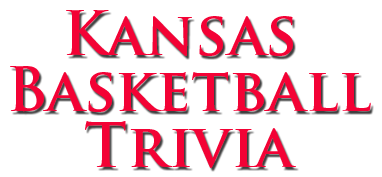
<style>
.page{position:relative;width:382px;height:177px;background:#ffffff}
.page>*{position:absolute;margin:0}
.t1{font:60px/56px "TrajanPro-Bold";color:#f30235}
</style>
<div class="page">
<p class="t1" style="left:10px;top:10px;width:361px;height:158px;text-align:center">Kansas <br>Basketball<br>Trivia</p>
</div>
